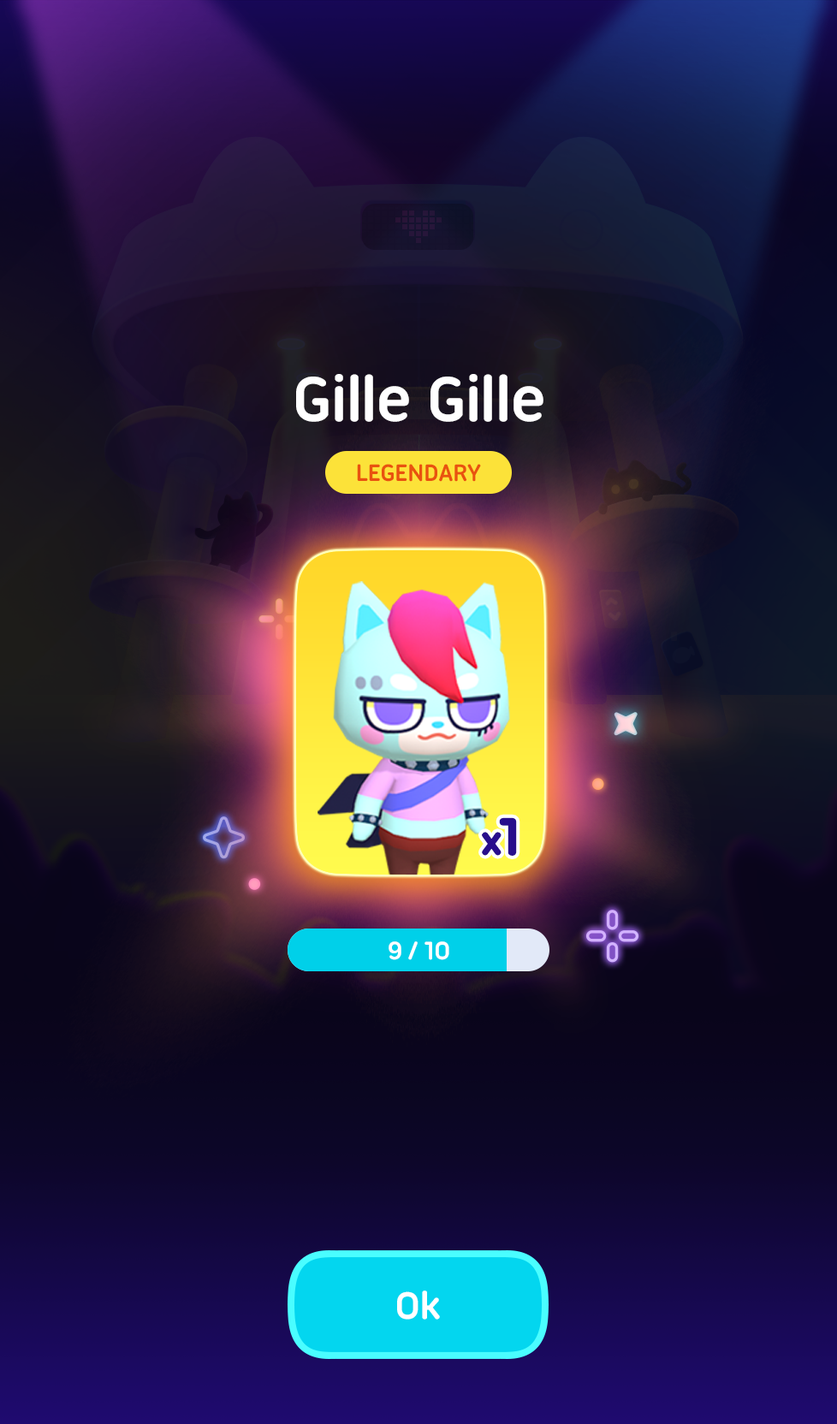
<style>
.page{position:relative;width:837px;height:1424px}
.page>*{position:absolute;margin:0}
.t1{font:68.5px "UbuntuTitling-Bold";letter-spacing:-0.025em;color:#ffffff}
.t2{font:25.7px "UbuntuTitling-Bold";letter-spacing:-0.025em;color:#e9520f;text-transform:uppercase}
.t3{font:42.2px "UbuntuTitling-Bold";letter-spacing:-0.025em;color:#280e8c;font-weight:bold}
.t4{font:55.4px "UbuntuTitling-Bold";letter-spacing:-0.025em;color:#280e8c;font-weight:bold}
.t5{font:27.4px "UbuntuTitling-Bold";letter-spacing:-0.025em;color:#ffffff}
.t6{font:41.1px "UbuntuTitling-Bold";letter-spacing:-0.025em;color:#ffffff}
</style>
<div class="page">
<p class="t1" style="left:296px;top:374px;width:248px;height:48px">Gille Gille</p>
<p class="t2" style="left:357px;top:464px;width:124px;height:18px">Legendary</p>
<p class="t3" style="left:482px;top:817px;width:35px;height:39px">x<span class="t4">1</span></p>
<p class="t5" style="left:389px;top:942px;width:60px;height:18px">9 / 10</p>
<p class="t6" style="left:397px;top:1291px;width:43px;height:29px">Ok</p>
</div>
